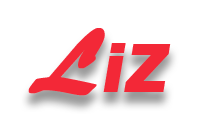
<style>
.page{position:relative;width:200px;height:119px;background:#ffffff}
.page>*{position:absolute;margin:0}
.t1{font:72px "FranklinGothic-HeavyItalic";letter-spacing:0.025em;color:#f32837}
.t2{font:92px "BrushScriptStd";letter-spacing:0.025em;color:#f32837;font-weight:bold}
</style>
<div class="page">
<p class="t1" style="left:28px;top:28px;width:143px;height:68px"><span class="t2">L</span>iZ</p>
</div>
